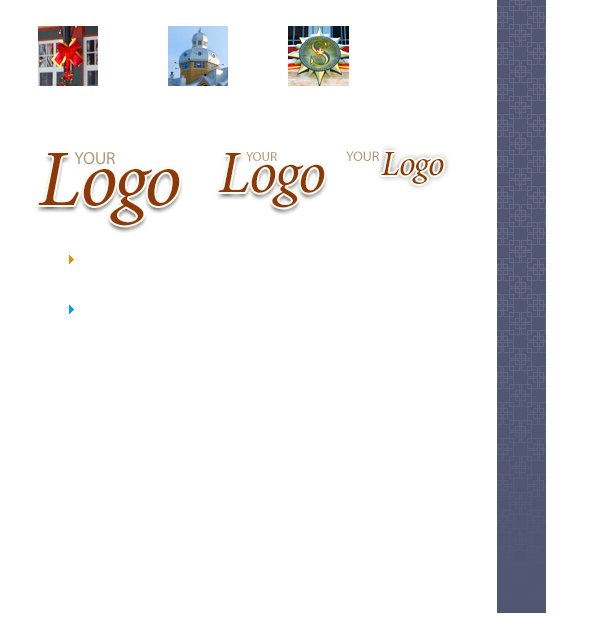
<style>
.page{position:relative;width:600px;height:625px;background:#ffffff}
.page>*{position:absolute;margin:0}
.t1{font:80px "MinionPro-It";letter-spacing:-0.04em;color:#8c3807}
.t2{font:80px "MinionPro-It";letter-spacing:-0.02em;color:#8c3807;text-transform:uppercase}
.t3{font:80px "MinionPro-It";color:#8c3807}
.t4{font:17.3px "MyriadPro-Regular";color:#b09675;text-transform:uppercase}
.t5{font:60px "MinionPro-It";letter-spacing:-0.04em;color:#8c3807}
.t6{font:60px "MinionPro-It";letter-spacing:-0.02em;color:#8c3807;text-transform:uppercase}
.t7{font:60px "MinionPro-It";color:#8c3807}
.t8{font:13px "MyriadPro-Regular";color:#b09675;text-transform:uppercase}
.t9{font:14px "MyriadPro-Regular";color:#b09675;text-transform:uppercase}
.t10{font:35.4px "MinionPro-It";letter-spacing:-0.04em;color:#8c3807}
.t11{font:35.4px "MinionPro-It";letter-spacing:-0.02em;color:#8c3807;text-transform:uppercase}
.t12{font:35.4px "MinionPro-It";color:#8c3807}
</style>
<div class="page">
<p class="t1" style="left:38px;top:153px;width:142px;height:73px"><span class="t2">L</span>og<span class="t3">o</span></p>
<p class="t4" style="left:74px;top:152px;width:41px;height:13px">YOUR</p>
<p class="t5" style="left:218px;top:153px;width:107px;height:55px"><span class="t6">L</span>og<span class="t7">o</span></p>
<p class="t8" style="left:246px;top:152px;width:31px;height:9px">YOUR</p>
<p class="t9" style="left:346px;top:151px;width:33px;height:10px">YOUR</p>
<p class="t10" style="left:381px;top:152px;width:63px;height:32px"><span class="t11">L</span>og<span class="t12">o</span></p>
</div>
